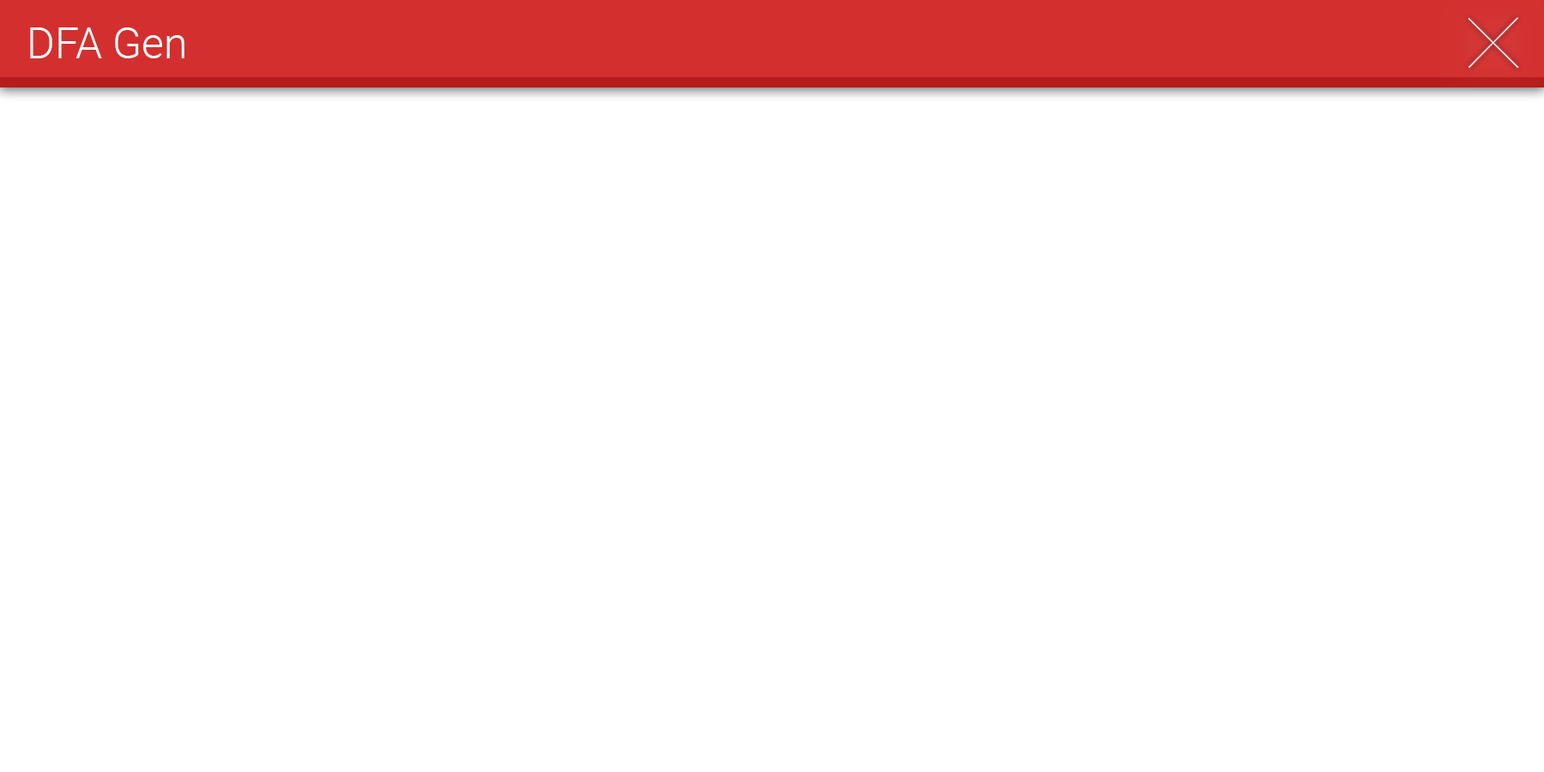
<style>
.page{position:relative;width:1544px;height:772px;background:#ffffff}
.page>*{position:absolute;margin:0}
.t1{font:42.9px "Roboto-Light";color:#ffffff}
</style>
<div class="page">
<p class="t1" style="left:30px;top:27px;width:154px;height:31px">DFA Gen</p>
</div>
